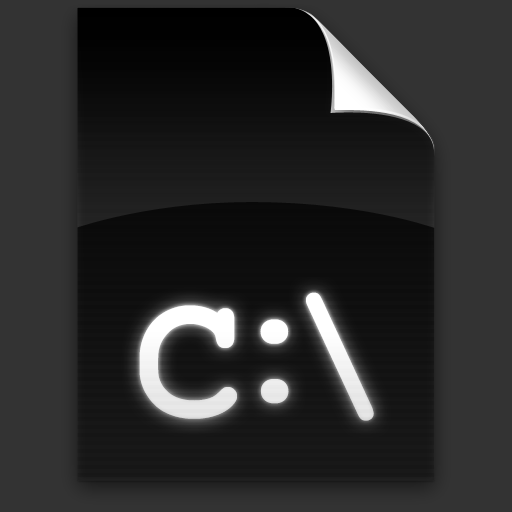
<style>
.page{position:relative;width:512px;height:512px;background:#333333}
.page>*{position:absolute;margin:0}
.t1{font:182px "CourierNewPS-BoldMT";letter-spacing:-0.125em;color:#ffffff}
.t2{font:182px "CourierNewPS-BoldMT";letter-spacing:-0.2em;color:#ffffff}
.t3{font:156px "CourierNewPS-BoldMT";letter-spacing:-0.1em;color:#ffffff}
</style>
<div class="page">
<p class="t1" style="left:139px;top:292px;width:235px;height:129px">C<span class="t2">:</span><span class="t3">\</span></p>
<p class="t1" style="left:139px;top:292px;width:235px;height:129px">C<span class="t2">:</span><span class="t3">\</span></p>
</div>
